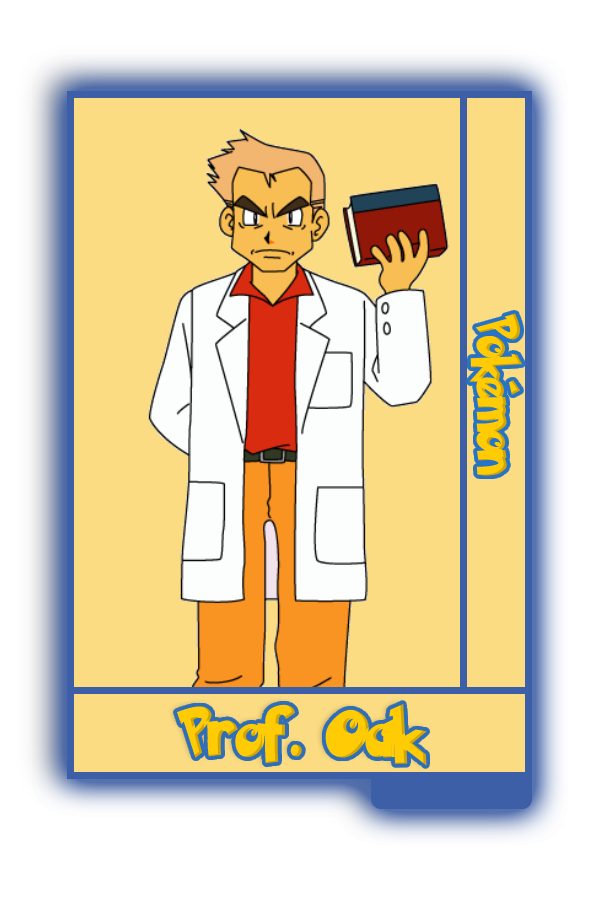
<style>
.page{position:relative;width:600px;height:900px;background:#fbdc83}
.page>*{position:absolute;margin:0}
.t1{font:48.8px "PokemonSolidNormal";color:#ffcb05;scale:0.8 1}
.t2{font:56.6px "PokemonSolidNormal";color:#ffcb05;scale:0.92 1}
</style>
<div class="page">
<p class="t1" style="left:469px;top:313px;width:54px;height:163px;rotate:90deg">Pokémon</p>
<p class="t2" style="left:176px;top:703px;width:251px;height:63px">Prof. Oak</p>
</div>
